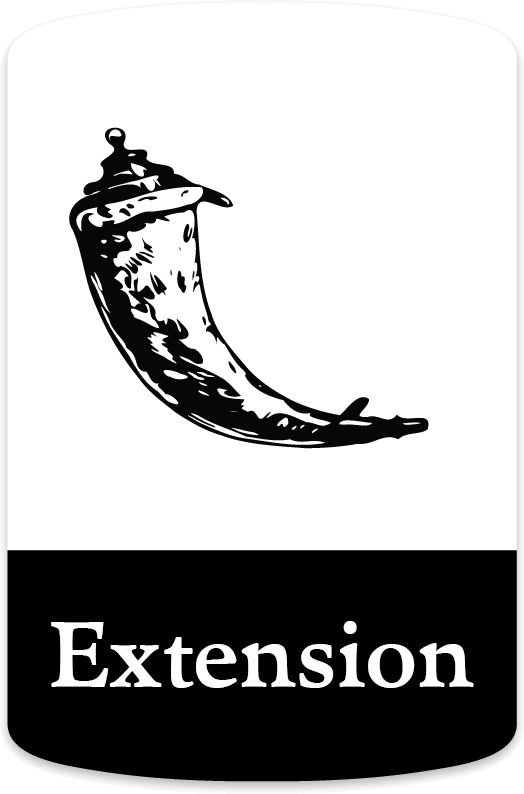
<style>
.page{position:relative;width:524px;height:794px;background:#ffffff}
.page>*{position:absolute;margin:0}
.t1{font:100px "Pesaro-Bold";color:#ffffff}
</style>
<div class="page">
<p class="t1" style="left:51px;top:621px;width:423px;height:67px">Extension</p>
</div>
